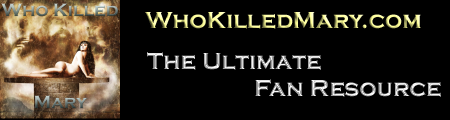
<style>
.page{position:relative;width:450px;height:120px;background:#000000}
.page>*{position:absolute;margin:0}
.t1{font:24px "CopperplateGothic-Bold"}
</style>
<div class="page">
<p class="t1" style="left:145px;top:12px;width:276px;height:17px">WhoKilledMary.com</p>
<p class="t1" style="left:147px;top:52px;width:174px;height:18px">The Ultimate</p>
<p class="t1" style="left:255px;top:79px;width:186px;height:18px">Fan Resource</p>
</div>
